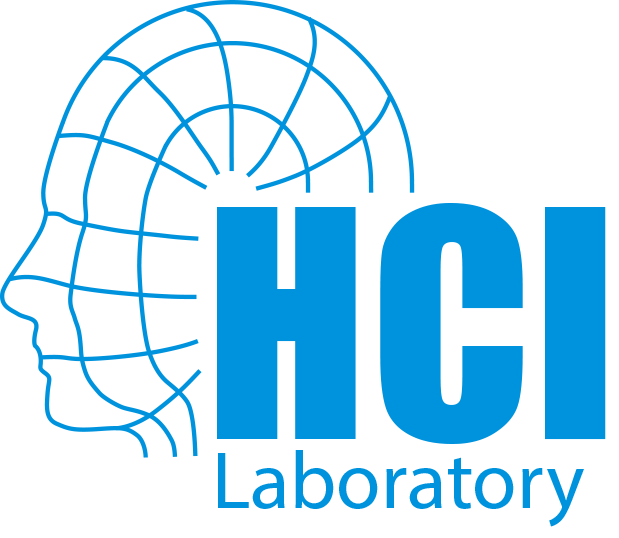
<style>
.page{position:relative;width:619px;height:538px;background:#ffffff}
.page>*{position:absolute;margin:0}
.t1{font:292.9px "Impact";color:#0093dd}
.t2{font:81.4px "MyriadPro-Regular";color:#0093dd}
</style>
<div class="page">
<p class="t1" style="left:217px;top:207px;width:139px;height:232px">H</p>
<p class="t1" style="left:380px;top:203px;width:226px;height:241px">CI</p>
<p class="t2" style="left:218px;top:450px;width:366px;height:77px">Laboratory</p>
</div>
